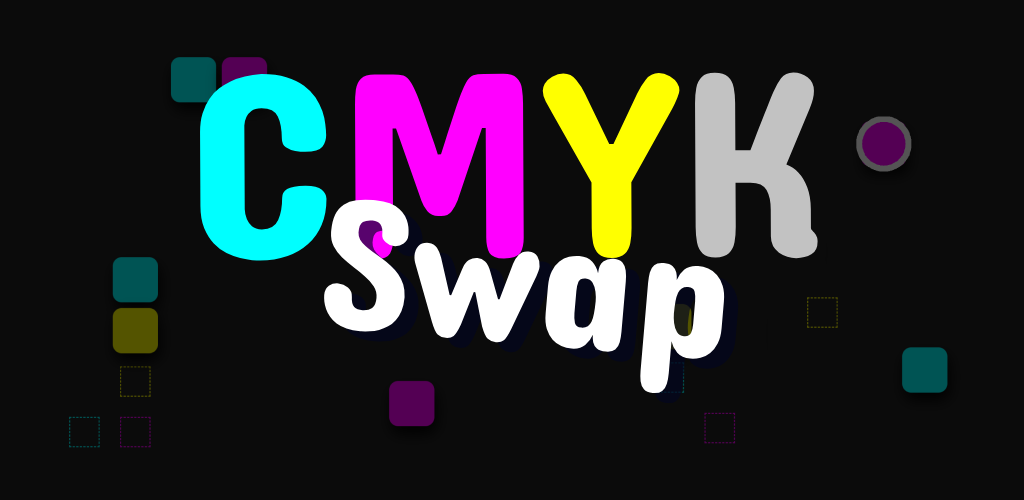
<style>
.page{position:relative;width:1024px;height:500px;background:#0b0b0b}
.page>*{position:absolute;margin:0}
.t1{font:270.1px "Dangrek-Regular"}
.t2{font:190.7px "Dangrek-Regular";color:#ffffff}
</style>
<div class="page">
<p class="t1" style="left:200px;top:72px;width:618px;height:189px">CMYK</p>
<p class="t2" style="left:323px;top:199px;width:402px;height:195px;rotate:5deg">Swap</p>
</div>
